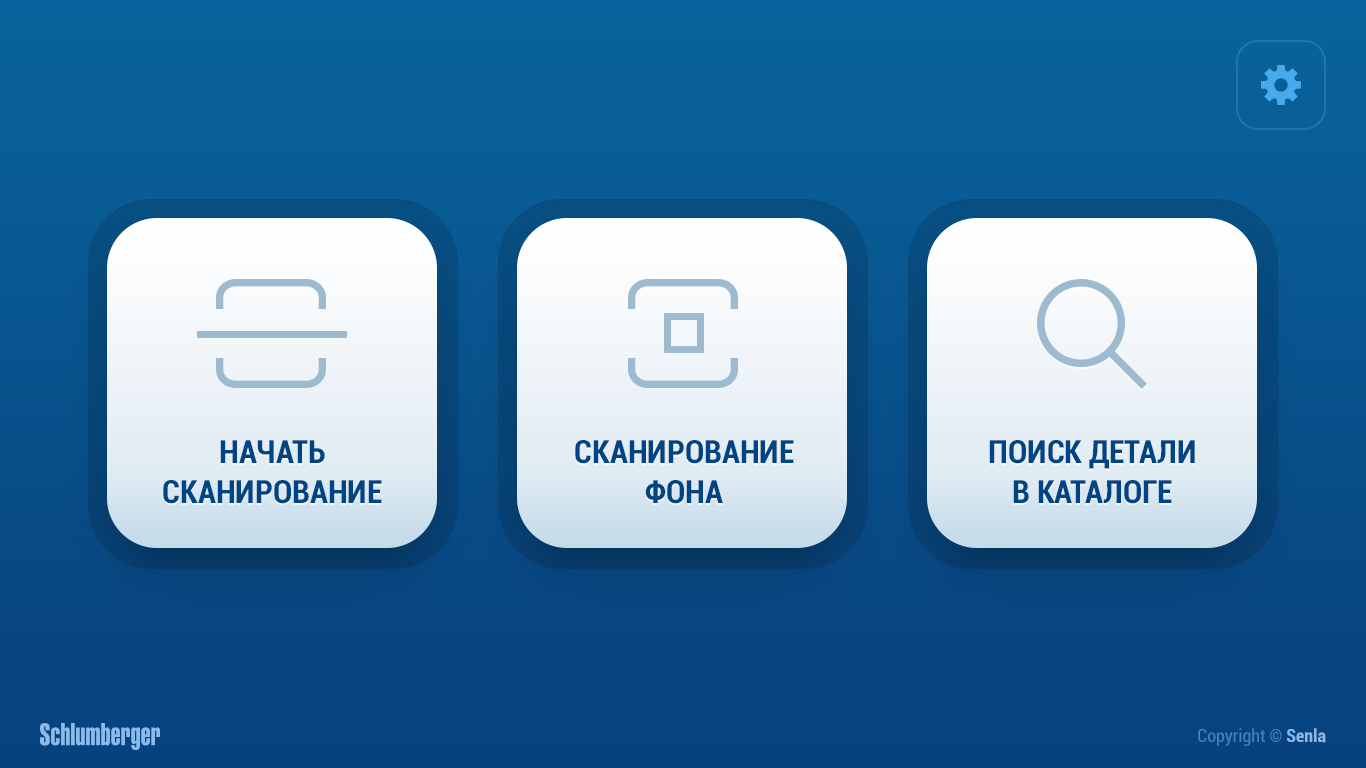
<style>
.page{position:relative;width:1366px;height:768px}
.page>*{position:absolute;margin:0}
.t1{font:32px/40px "Roboto-BoldCondensed";color:#004483;text-transform:uppercase}
.t2{font:18px "Roboto-Condensed";color:#4282c2}
.t3{font:18px "Roboto-BoldCondensed";color:#4282c2}
.t4{font:18px "Roboto-BoldCondensed";color:#8bbbeb}
</style>
<div class="page">
<p class="t1" style="left:163px;top:440px;width:219px;height:64px;text-align:center">начать<br>сканирование</p>
<p class="t1" style="left:575px;top:440px;width:219px;height:64px;text-align:center">сканирование<br>фона</p>
<p class="t1" style="left:989px;top:440px;width:206px;height:64px;text-align:center">поиск детали<br>в каталоге</p>
<p class="t2" style="left:1198px;top:728px;width:128px;height:18px">Copyright <span class="t3">© </span><span class="t4">Senla</span></p>
</div>
